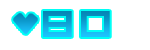
<style>
.page{position:relative;width:150px;height:50px;background:#ffffff}
.page>*{position:absolute;margin:0}
.t1{font:66.7px "VisitorTT2BRK";letter-spacing:0.04em;scale:1.11 1}
</style>
<div class="page">
<p class="t1" style="left:43px;top:11px;width:67px;height:26px">80</p>
</div>
